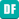
<style>
.page{position:relative;width:19px;height:19px;background:#00ada6}
.page>*{position:absolute;margin:0}
.t1{font:12px "Impact";letter-spacing:0.05em;color:#ffffff}
</style>
<div class="page">
<p class="t1" style="left:4px;top:4px;width:12px;height:10px">DF</p>
</div>
